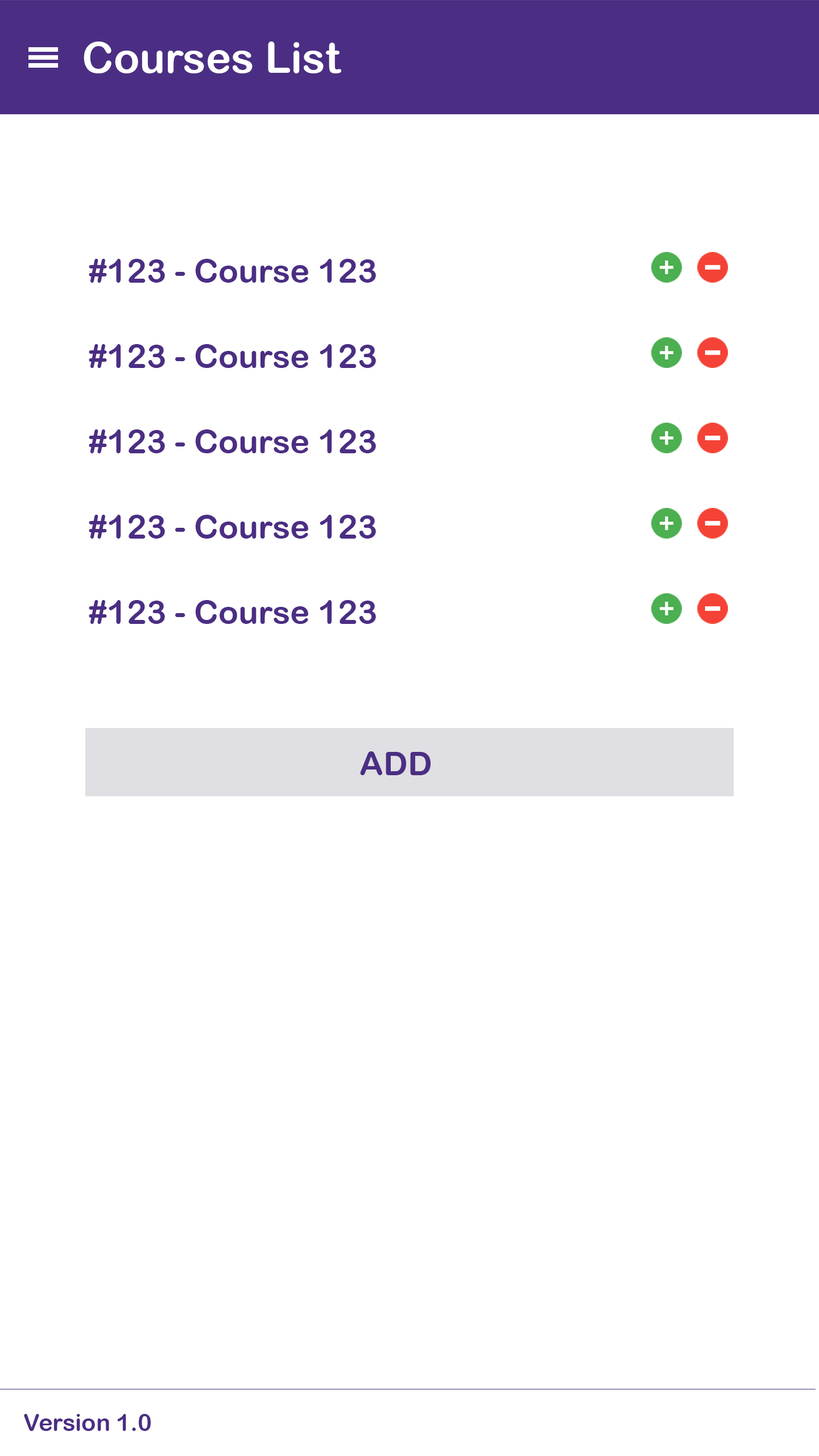
<style>
.page{position:relative;width:819px;height:1456px;background:#ffffff}
.page>*{position:absolute;margin:0}
.t1{font:42.7px "ArialRoundedMTBold";color:#ffffff}
.t2{font:33.2px "ArialRoundedMTBold";color:#4b2e83}
.t3{font:23.7px "ArialRoundedMTBold";color:#4b2e83}
</style>
<div class="page">
<p class="t1" style="left:84px;top:42px;width:257px;height:31px">Courses List</p>
<p class="t2" style="left:89px;top:259px;width:287px;height:24px">#123 - Course 123</p>
<p class="t2" style="left:89px;top:344px;width:287px;height:24px">#123 - Course 123</p>
<p class="t2" style="left:89px;top:429px;width:287px;height:24px">#123 - Course 123</p>
<p class="t2" style="left:89px;top:515px;width:287px;height:24px">#123 - Course 123</p>
<p class="t2" style="left:89px;top:600px;width:287px;height:24px">#123 - Course 123</p>
<p class="t2" style="left:360px;top:751px;width:71px;height:24px">ADD</p>
<p class="t3" style="left:24px;top:1414px;width:127px;height:17px">Version 1.0</p>
</div>
